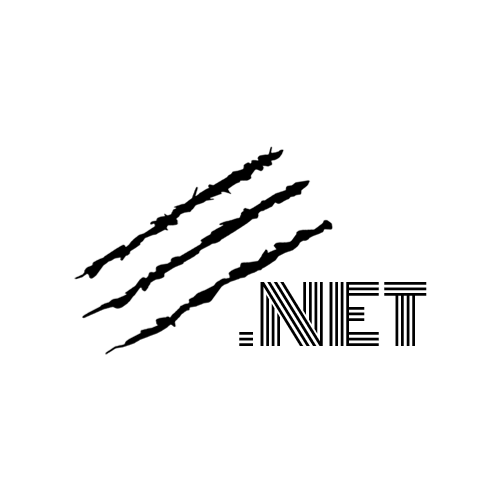
<style>
.page{position:relative;width:500px;height:500px;background:#ffffff}
.page>*{position:absolute;margin:0}
.t1{font:79.2px "Monoton-Regular";color:#000000}
</style>
<div class="page">
<p class="t1" style="left:239px;top:282px;width:188px;height:64px">.NET</p>
</div>
